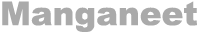
<style>
.page{position:relative;width:200px;height:34px;background:#ffffff}
.page>*{position:absolute;margin:0}
.t1{font:32.7px "Arial-Black";color:#aaaaaa}
</style>
<div class="page">
<p class="t1" style="left:2px;top:1px;width:195px;height:31px">Manganeet</p>
</div>
